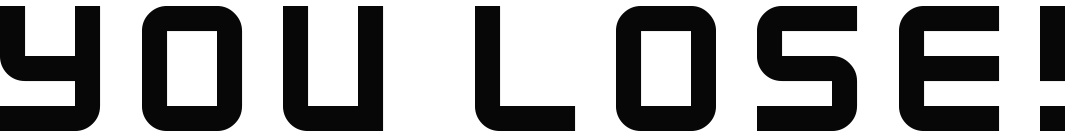
<style>
.page{position:relative;width:1065px;height:137px;background:#ffffff}
.page>*{position:absolute;margin:0}
.t1{font:200px "KenVector-Future-Thin";color:#080707}
</style>
<div class="page">
<p class="t1" style="left:0px;top:6px;width:1065px;height:125px">You lose!</p>
</div>
